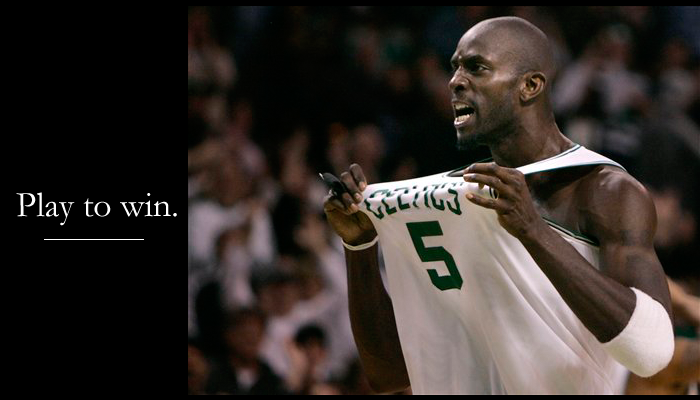
<style>
.page{position:relative;width:700px;height:400px;background:#000000}
.page>*{position:absolute;margin:0}
.t1{font:36px "Garamond";color:#ffffff}
</style>
<div class="page">
<p class="t1" style="left:16px;top:192px;width:161px;height:34px">Play to win.</p>
</div>
